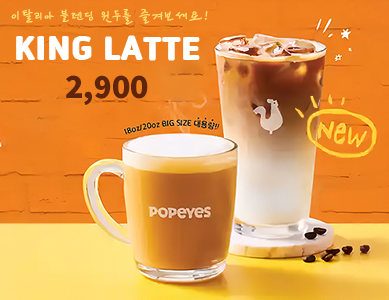
<style>
.page{position:relative;width:389px;height:300px}
.page>*{position:absolute;margin:0}
.t1{font:14px "KCC-Kimhwanki";letter-spacing:0.1em;color:#ffe074}
.t2{font:27px "SuseongDotum-Regular";letter-spacing:0.08em;color:#ffffff}
.t3{font:30px "NotoSansKR-Black";color:#5e250c}
</style>
<div class="page">
<p class="t1" style="left:11px;top:8px;width:197px;height:17px">이탈리아 블렌딩 원두를 즐겨보세요!</p>
<p class="t2" style="left:17px;top:36px;width:182px;height:24px">KING LATTE</p>
<p class="t3" style="left:66px;top:75px;width:82px;height:30px">2,900</p>
</div>
